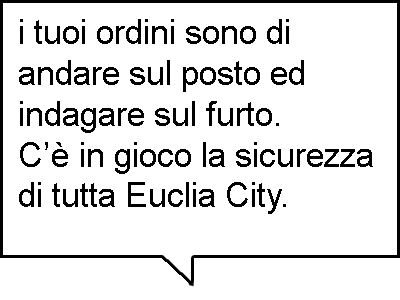
<style>
.page{position:relative;width:400px;height:300px;background:#ffffff}
.page>*{position:absolute;margin:0}
.t1{font:34px "ArialMT";color:#000000}
</style>
<div class="page">
<p class="t1" style="left:19px;top:19px;width:354px;height:195px">i tuoi ordini sono di<br>andare sul posto ed<br>indagare sul furto.<br>C’è in gioco la sicurezza<br>di tutta Euclia City.</p>
</div>
